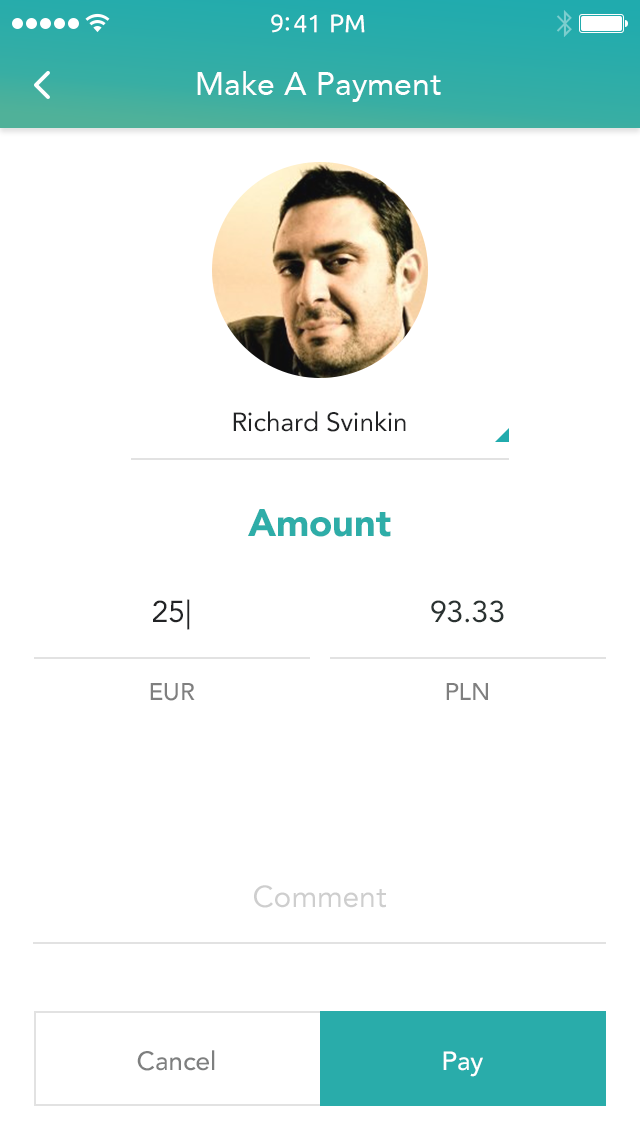
<style>
.page{position:relative;width:640px;height:1136px;background:#ffffff}
.page>*{position:absolute;margin:0}
.t1{font:25px "Ubuntu";color:#ffffff}
.t2{font:32px "Avenir-Roman";color:#ffffff}
.t3{font:26px "Avenir-Roman";color:#222325}
.t4{font:38px "Avenir-Black";color:#2eada8}
.t5{font:30px/78px "Avenir-Roman";color:#222325}
.t6{font:24px/78px "Avenir-Medium";color:#7f7f7f}
.t7{font:30px/30px "Avenir-Roman";color:#2a3231}
.t8{font:30px "Avenir-Roman";color:#cecece}
.t9{font:26px "Avenir-Medium";color:#7e7f7f}
.t10{font:26px "Avenir-Medium";color:#ffffff}
</style>
<div class="page">
<p class="t1" style="left:271px;top:14px;width:94px;height:19px">9:41 PM</p>
<p class="t2" style="left:197px;top:71px;width:244px;height:31px">Make A Payment</p>
<p class="t3" style="left:233px;top:411px;width:173px;height:21px">Richard Svinkin</p>
<p class="t4" style="left:248px;top:509px;width:143px;height:28px">Amount</p>
<p class="t5" style="left:150px;top:599px;width:45px;height:102px;text-align:center">25|<br><span class="t6">EUR</span></p>
<p class="t7" style="left:431px;top:600px;width:73px;height:100px;text-align:center">93.33<br><span class="t6">PLN</span></p>
<p class="t8" style="left:254px;top:885px;width:132px;height:23px">Comment</p>
<p class="t9" style="left:137px;top:1050px;width:78px;height:21px">Cancel</p>
<p class="t10" style="left:443px;top:1051px;width:40px;height:26px">Pay</p>
</div>
